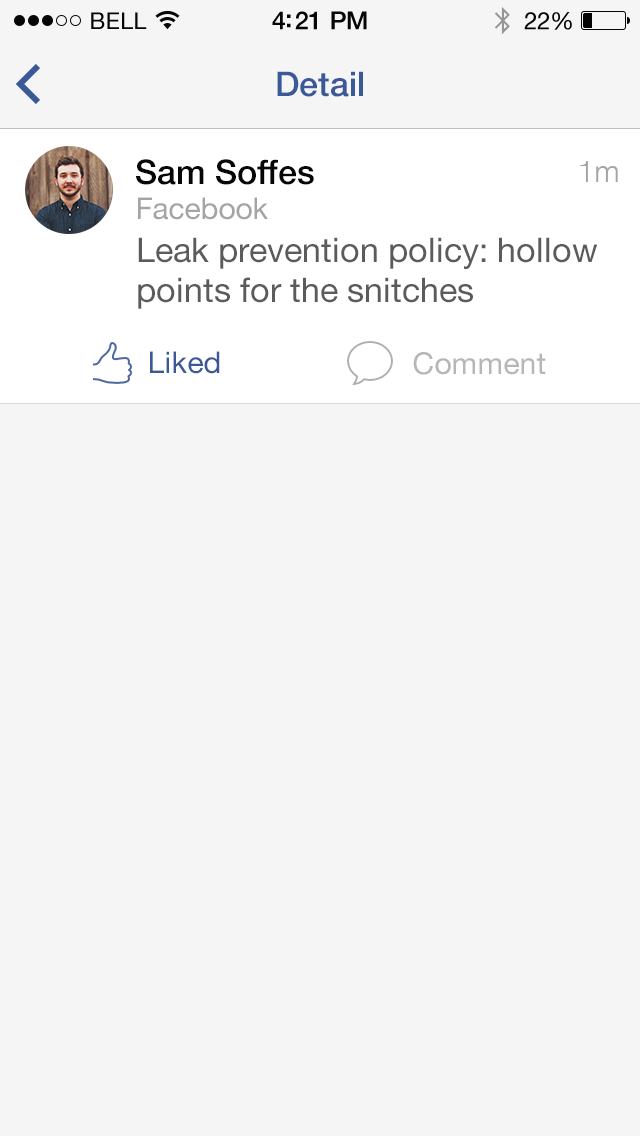
<style>
.page{position:relative;width:640px;height:1136px;background:#f5f5f5}
.page>*{position:absolute;margin:0}
.t1{font:23px "HelveticaNeue";letter-spacing:0.02em;color:#060606}
.t2{font:25px "HelveticaNeue-Medium";letter-spacing:-0.02em;color:#060606}
.t3{font:24px "HelveticaNeue";letter-spacing:-0.02em;color:#060606}
.t4{font:34px "HelveticaNeue-Medium";color:#3b5998}
.t5{font:34px "HelveticaNeue-Medium";color:#060606}
.t6{font:30px "HelveticaNeue-Light";color:#a4a4a4}
.t7{font:30px "HelveticaNeue";color:#a4a4a4}
.t8{font:34px "HelveticaNeue";color:#5b5b5b}
.t9{font:30px "HelveticaNeue";color:#3b5998}
.t10{font:30px "HelveticaNeue";color:#b6b6b6}
</style>
<div class="page">
<p class="t1" style="left:91px;top:12px;width:56px;height:17px">BELL</p>
<p class="t2" style="left:272px;top:11px;width:95px;height:19px">4:21 PM</p>
<p class="t3" style="left:524px;top:12px;width:48px;height:18px">22%</p>
<p class="t4" style="left:277px;top:71px;width:86px;height:26px">Detail</p>
<p class="t5" style="left:136px;top:159px;width:178px;height:26px">Sam Soffes</p>
<p class="t6" style="left:580px;top:161px;width:38px;height:21px">1m</p>
<p class="t7" style="left:138px;top:197px;width:130px;height:23px">Facebook</p>
<p class="t8" style="left:138px;top:237px;width:460px;height:72px">Leak prevention policy: hollow<br>points for the snitches</p>
<p class="t9" style="left:150px;top:351px;width:70px;height:23px">Liked</p>
<p class="t10" style="left:413px;top:352px;width:133px;height:23px">Comment</p>
</div>
